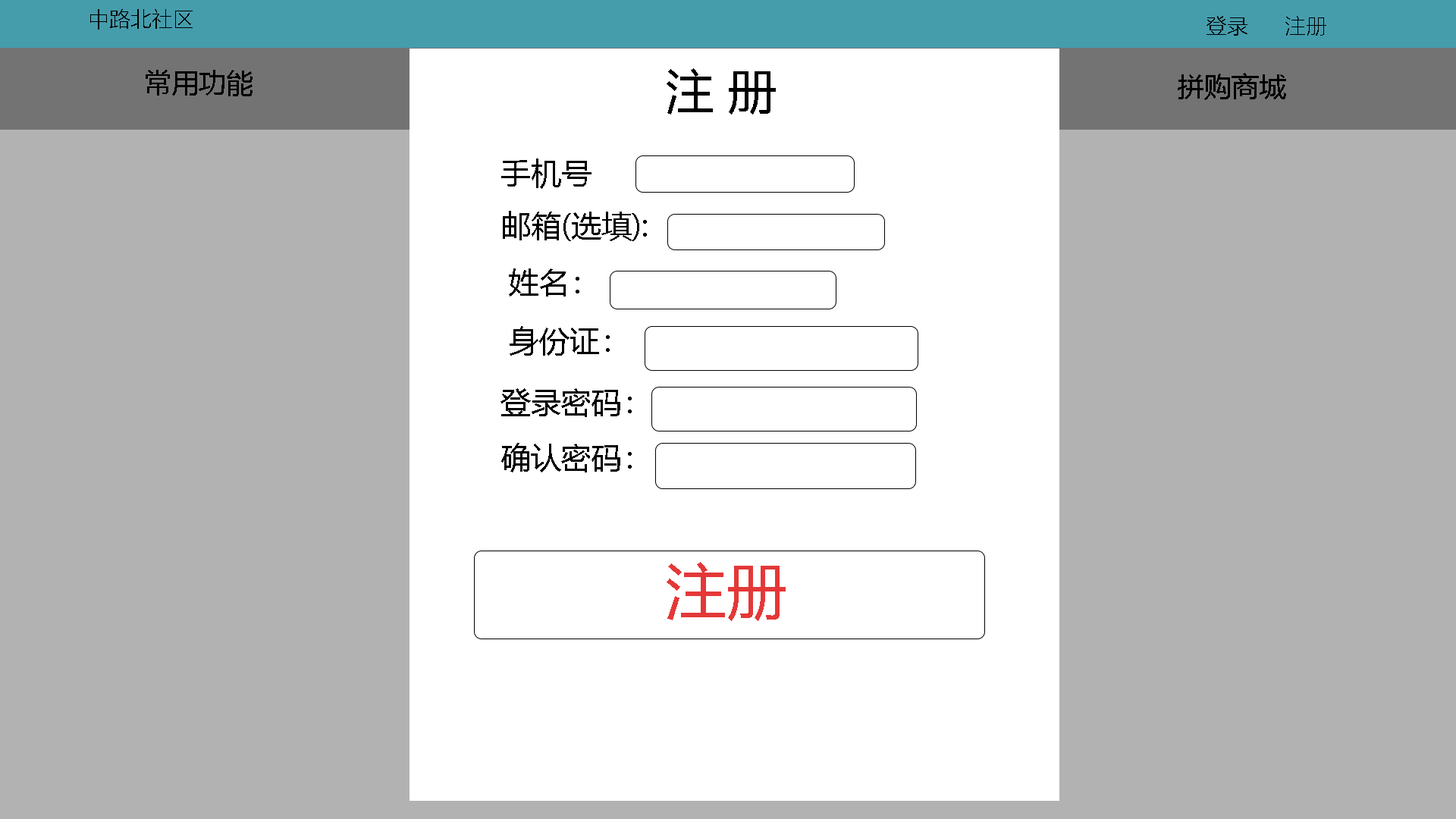
<style>
.page{position:relative;width:1456px;height:819px;background:#b2b2b2}
.page>*{position:absolute;margin:0}
.t1{font:21.2px "MicrosoftYaHeiLight";color:#000000}
.t2{font:27.3px "MicrosoftYaHei";color:#000000}
.t3{font:47.8px "MicrosoftYaHei";color:#000000}
.t4{font:30.3px "MicrosoftYaHei";color:#000000}
.t5{font:60.7px "MicrosoftYaHei";color:#e43838}
</style>
<div class="page">
<p class="t1" style="left:90px;top:9px;width:103px;height:21px">中路北社区</p>
<p class="t1" style="left:1206px;top:16px;width:120px;height:20px">登录      注册</p>
<p class="t2" style="left:146px;top:70px;width:107px;height:26px">常用功能</p>
<p class="t3" style="left:667px;top:68px;width:109px;height:47px">注 册</p>
<p class="t2" style="left:1178px;top:73px;width:108px;height:27px">拼购商城</p>
<p class="t4" style="left:501px;top:158px;width:90px;height:31px">手机号</p>
<p class="t4" style="left:503px;top:211px;width:144px;height:30px">邮箱(选填):</p>
<p class="t4" style="left:509px;top:268px;width:70px;height:29px">姓名：</p>
<p class="t4" style="left:510px;top:326px;width:100px;height:30px">身份证：</p>
<p class="t4" style="left:500px;top:388px;width:132px;height:29px">登录密码：</p>
<p class="t4" style="left:501px;top:443px;width:131px;height:29px">确认密码：</p>
<p class="t5" style="left:667px;top:562px;width:119px;height:59px">注册</p>
</div>
